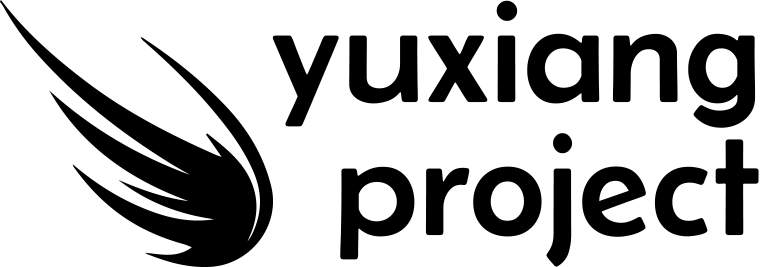
<style>
.page{position:relative;width:762px;height:267px;background:#ffffff}
.page>*{position:absolute;margin:0}
.t1{font:150px/133.3px "Belanosima-Regular";color:#000000}
</style>
<div class="page">
<p class="t1" style="left:272px;top:0px;width:487px;height:267px;text-align:right">yuxiang<br>project</p>
</div>
